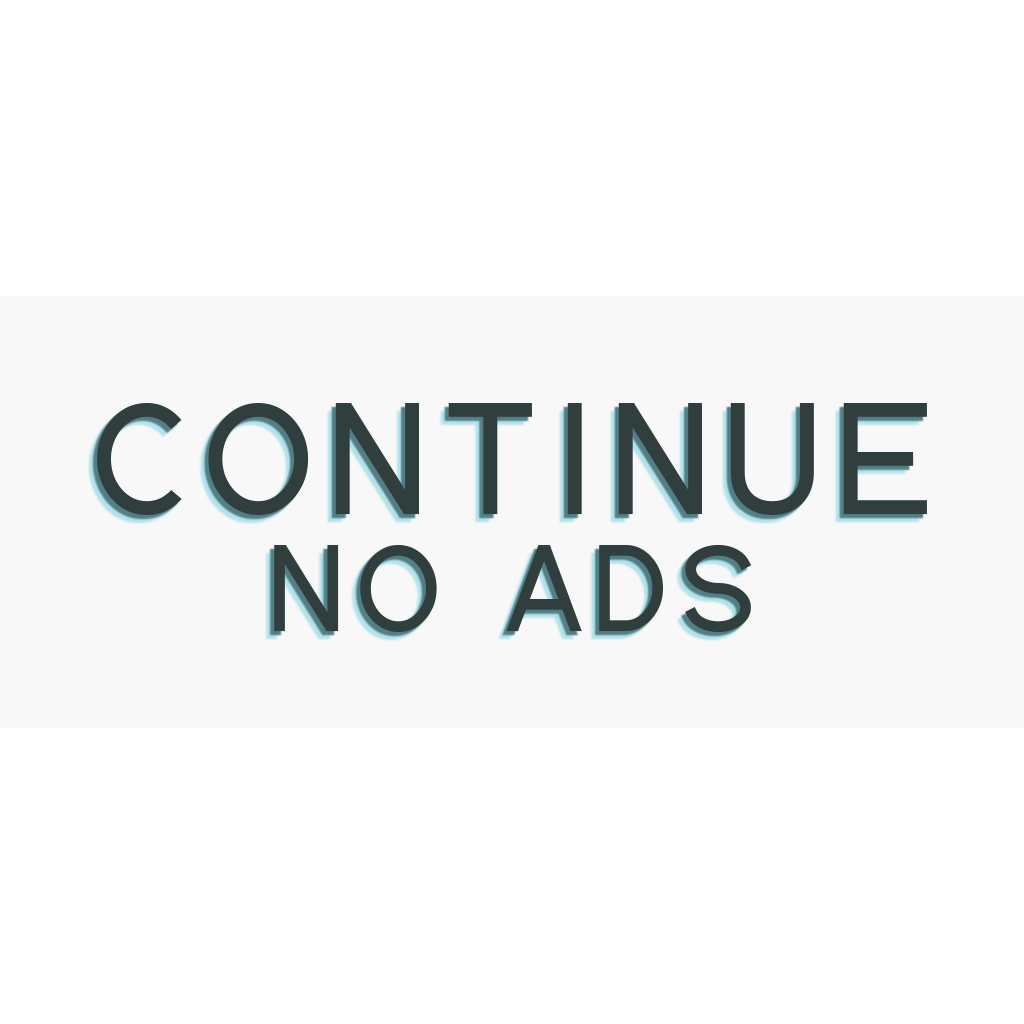
<style>
.page{position:relative;width:1024px;height:1024px;background:#ffffff}
.page>*{position:absolute;margin:0}
.t1{font:158.9px "Qaz";letter-spacing:0.1em;color:#313e3e;text-transform:uppercase}
.t2{font:122.2px "Qaz";letter-spacing:0.1em;color:#313e3e}
</style>
<div class="page">
<p class="t1" style="left:97px;top:403px;width:830px;height:112px">CONTINUE</p>
<p class="t2" style="left:274px;top:545px;width:478px;height:87px">NO ADS</p>
</div>
